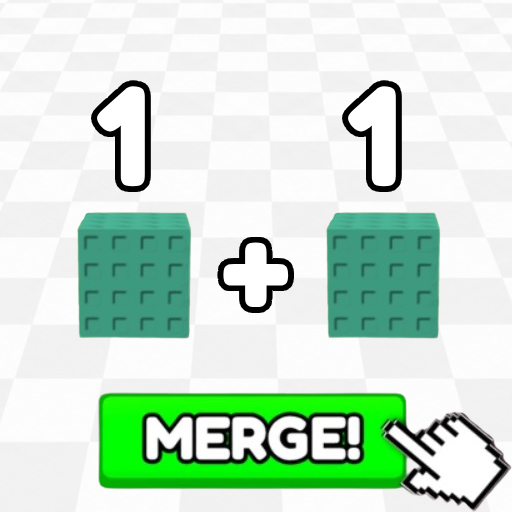
<style>
.page{position:relative;width:512px;height:512px}
.page>*{position:absolute;margin:0}
.t1{font:135.8px "FredokaOne-Regular";color:#ffffff}
</style>
<div class="page">
<p class="t1" style="left:97px;top:86px;width:48px;height:101px">1</p>
<p class="t1" style="left:348px;top:86px;width:48px;height:101px">1</p>
<p class="t1" style="left:223px;top:242px;width:66px;height:66px">+</p>
</div>
